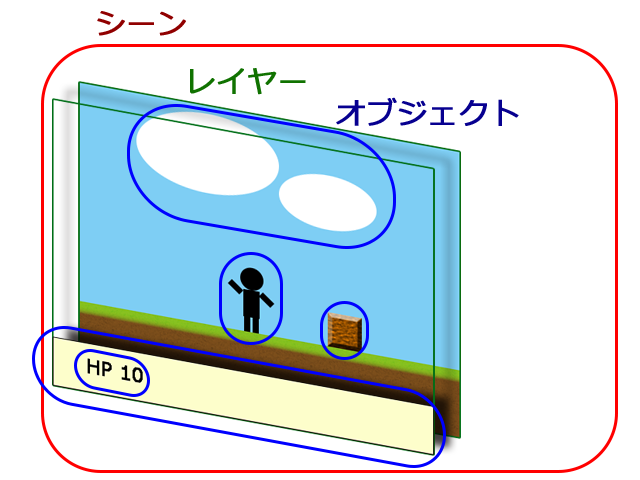
<style>
.page{position:relative;width:640px;height:480px;background:#ffffff}
.page>*{position:absolute;margin:0}
.t1{font:30px "Meiryo";color:#900000;font-weight:bold}
.t2{font:30px "Meiryo";color:#107200;font-weight:bold}
.t3{font:30px "Meiryo";color:#070090;font-weight:bold}
</style>
<div class="page">
<p class="t1" style="left:97px;top:11px;width:89px;height:25px">シーン</p>
<p class="t2" style="left:190px;top:68px;width:116px;height:27px">レイヤー</p>
<p class="t3" style="left:336px;top:97px;width:183px;height:29px">オブジェクト</p>
</div>
